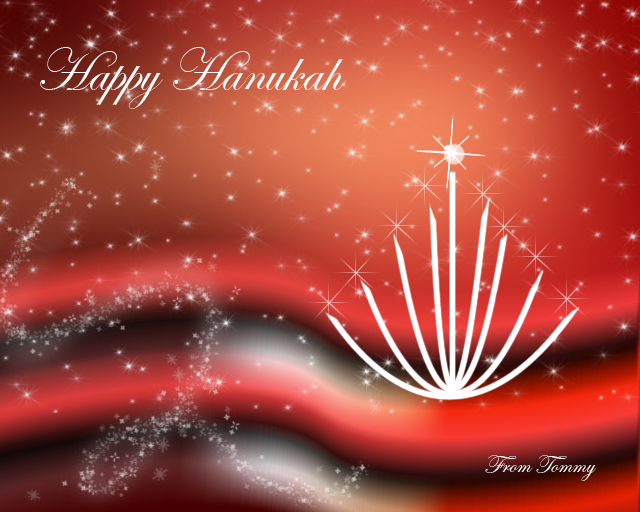
<style>
.page{position:relative;width:640px;height:512px}
.page>*{position:absolute;margin:0}
.t1{font:60px "EdwardianScriptITC";color:#ffffff}
.t2{font:26px "EdwardianScriptITC";color:#ffffff}
</style>
<div class="page">
<p class="t1" style="left:40px;top:47px;width:307px;height:62px">Happy Hanukah</p>
<p class="t2" style="left:485px;top:455px;width:112px;height:26px">From Tommy</p>
</div>
